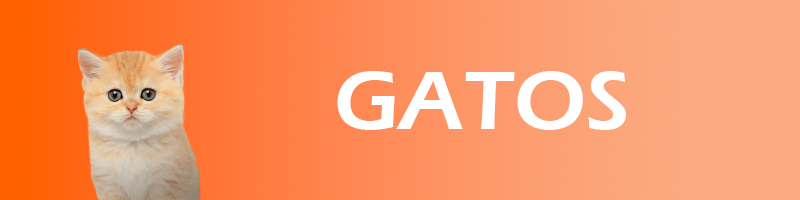
<style>
.page{position:relative;width:800px;height:200px}
.page>*{position:absolute;margin:0}
.t1{font:86.2px "ErasITC-Demi";color:#ffffff}
</style>
<div class="page">
<p class="t1" style="left:337px;top:71px;width:289px;height:59px">GATOS</p>
</div>
